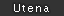
<style>
.page{position:relative;width:64px;height:16px;background:#333333}
.page>*{position:absolute;margin:0}
.t1{font:11px "LucidaSans";letter-spacing:0.1em;color:#ffffff}
</style>
<div class="page">
<p class="t1" style="left:14px;top:4px;width:35px;height:8px">Utena</p>
</div>
